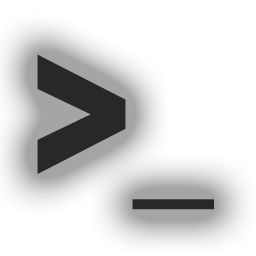
<style>
.page{position:relative;width:256px;height:256px;background:#ffffff}
.page>*{position:absolute;margin:0}
.t1{font:196.6px "Arial-Black";color:#282828;scale:0.81 1}
</style>
<div class="page">
<p class="t1" style="left:37px;top:54px;width:177px;height:156px">&gt;_</p>
</div>
